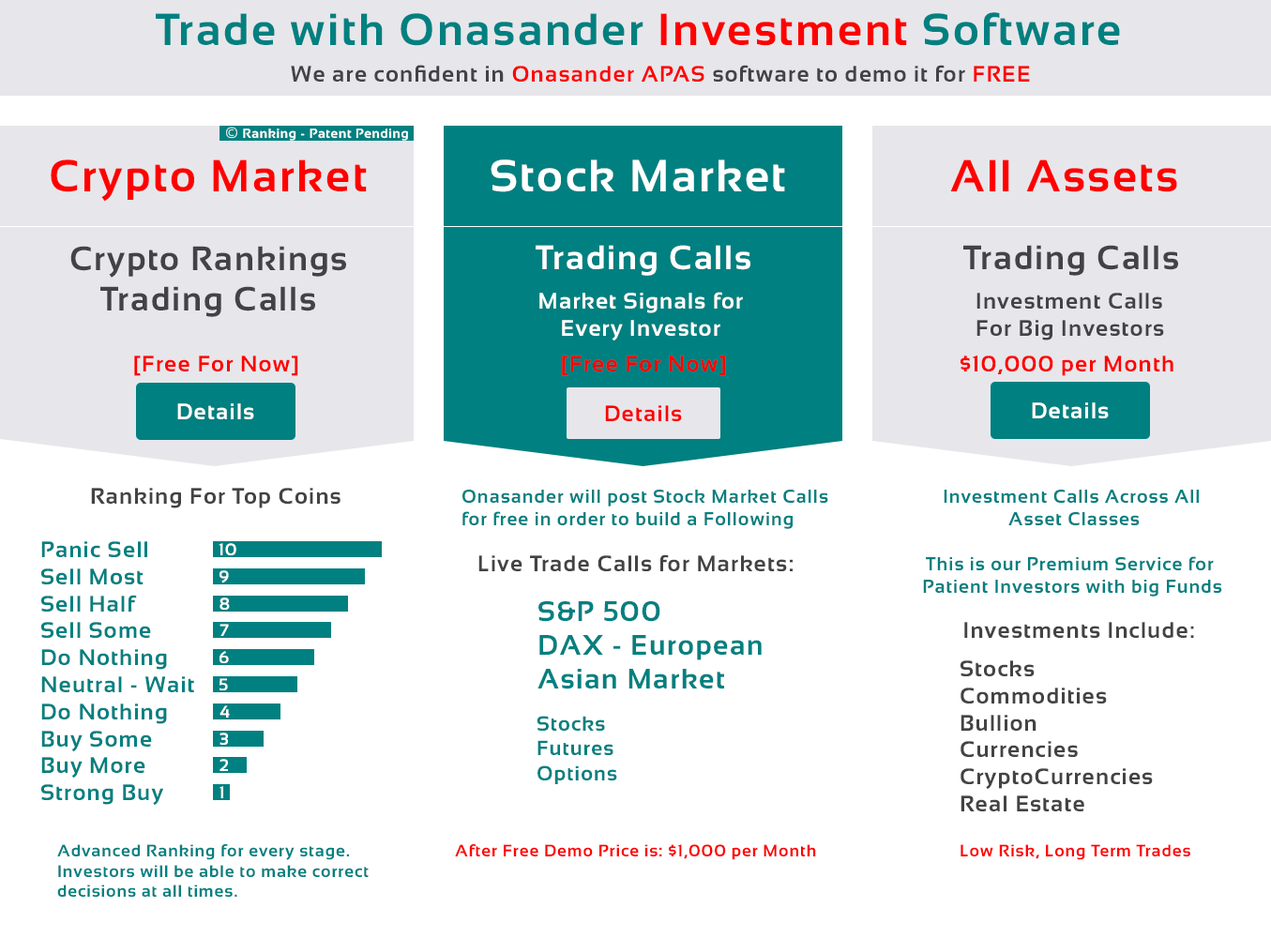
<style>
.page{position:relative;width:1271px;height:938px;background:#ffffff}
.page>*{position:absolute;margin:0}
.t1{font:45px "Sansation-Bold";letter-spacing:0.05em;color:#008080}
.t2{font:45px "Sansation-Bold";letter-spacing:0.05em;color:#ff0000}
.t3{font:22.5px "Sansation-Bold";letter-spacing:0.05em;color:#434244}
.t4{font:22.5px "Sansation-Bold";letter-spacing:0.05em;color:#ff0000}
.t5{font:13.1px "Sansation-Bold";letter-spacing:0.05em;color:#ffffff}
.t6{font:15px "Sansation-Bold";letter-spacing:0.05em;color:#ffffff}
.t7{font:45px "Sansation-Bold";letter-spacing:0.05em;color:#ffffff}
.t8{font:33.8px "Sansation-Bold";letter-spacing:0.05em;color:#434244}
.t9{font:33.8px "Sansation-Bold";letter-spacing:0.05em;color:#ffffff}
.t10{font:22.5px "Sansation-Bold";letter-spacing:0.05em;color:#ffffff}
.t11{font:18.8px "Sansation-Bold";letter-spacing:0.05em;color:#008080}
.t12{font:22.5px "Sansation-Bold";letter-spacing:0.05em;color:#008080}
.t13{font:16.9px "Sansation-Bold";letter-spacing:0.05em;color:#ffffff}
.t14{font:28.1px "Sansation-Bold";letter-spacing:0.05em;color:#008080}
.t15{font:20.6px "Sansation-Bold";letter-spacing:0.05em;color:#008080}
.t16{font:16.9px "Sansation-Bold";letter-spacing:0.05em;color:#008080}
.t17{font:16.9px "Sansation-Bold";letter-spacing:0.05em;color:#ff0000}
</style>
<div class="page">
<p class="t1" style="left:156px;top:12px;width:964px;height:34px">Trade with Onasander <span class="t2">Investment</span> Software</p>
<p class="t3" style="left:291px;top:65px;width:739px;height:17px">We are confident in <span class="t4">Onasander APAS</span> software to demo it for <span class="t4">FREE</span></p>
<p class="t5" style="left:226px;top:127px;width:182px;height:14px"><span class="t6">©</span> Ranking - Patent Pending</p>
<p class="t2" style="left:51px;top:159px;width:316px;height:43px">Crypto Market</p>
<p class="t7" style="left:491px;top:159px;width:294px;height:33px">Stock Market</p>
<p class="t2" style="left:950px;top:159px;width:227px;height:33px">All Assets</p>
<p class="t8" style="left:70px;top:246px;width:276px;height:71px;text-align:center">Crypto Rankings<br>Trading Calls</p>
<p class="t9" style="left:536px;top:245px;width:214px;height:31px">Trading Calls</p>
<p class="t8" style="left:963px;top:245px;width:215px;height:31px">Trading Calls</p>
<p class="t10" style="left:539px;top:292px;width:204px;height:49px;text-align:center">Market Signals for <br>Every Investor</p>
<p class="t3" style="left:977px;top:293px;width:187px;height:48px">Investment Calls<br>For Big Investors</p>
<p class="t4" style="left:134px;top:356px;width:164px;height:20px">[Free For Now]</p>
<p class="t4" style="left:562px;top:356px;width:164px;height:20px">[Free For Now]</p>
<p class="t4" style="left:961px;top:356px;width:213px;height:20px">$10,000 per Month</p>
<p class="t10" style="left:177px;top:403px;width:77px;height:16px">Details</p>
<p class="t4" style="left:605px;top:405px;width:77px;height:16px">Details</p>
<p class="t10" style="left:1032px;top:402px;width:77px;height:16px">Details</p>
<p class="t3" style="left:91px;top:488px;width:250px;height:20px">Ranking For Top Coins</p>
<p class="t11" style="left:462px;top:490px;width:366px;height:39px">Onasander will post Stock Market Calls<br>for free in order to build a Following</p>
<p class="t11" style="left:944px;top:490px;width:255px;height:35px;text-align:center">Investment Calls Across All <br>Asset Classes</p>
<p class="t12" style="left:41px;top:541px;width:153px;height:264px">Panic Sell<br>Sell Most<br>Sell Half<br>Sell Some<br>Do Nothing<br>Neutral - Wait<br>Do Nothing<br>Buy Some<br>Buy More<br>Strong Buy</p>
<p class="t13" style="left:219px;top:543px;width:17px;height:12px">10</p>
<p class="t3" style="left:478px;top:554px;width:315px;height:17px">Live Trade Calls for Markets:</p>
<p class="t11" style="left:923px;top:556px;width:299px;height:41px;text-align:center">This is our Premium Service for <br>Patient Investors with big Funds</p>
<p class="t13" style="left:220px;top:570px;width:9px;height:13px">9</p>
<p class="t13" style="left:220px;top:598px;width:10px;height:12px">8</p>
<p class="t14" style="left:538px;top:601px;width:224px;height:89px">S&amp;P 500<br>DAX - European<br>Asian Market</p>
<p class="t13" style="left:220px;top:624px;width:9px;height:12px">7</p>
<p class="t3" style="left:964px;top:622px;width:230px;height:16px">Investments Include:</p>
<p class="t13" style="left:220px;top:651px;width:9px;height:12px">6</p>
<p class="t3" style="left:961px;top:660px;width:192px;height:151px">Stocks<br>Commodities<br>Bullion<br>Currencies<br>CryptoCurrencies<br>Real Estate</p>
<p class="t13" style="left:220px;top:678px;width:8px;height:12px">5</p>
<p class="t13" style="left:220px;top:705px;width:10px;height:13px">4</p>
<p class="t15" style="left:537px;top:716px;width:80px;height:68px">Stocks<br>Futures<br>Options</p>
<p class="t13" style="left:220px;top:733px;width:8px;height:12px">3</p>
<p class="t13" style="left:220px;top:759px;width:8px;height:12px">2</p>
<p class="t13" style="left:220px;top:786px;width:3px;height:12px">1</p>
<p class="t16" style="left:57px;top:844px;width:312px;height:53px">Advanced Ranking for every stage.<br>Investors will be able to make correct <br>decisions at all times.</p>
<p class="t17" style="left:455px;top:844px;width:361px;height:16px">After Free Demo Price is: $1,000 per Month</p>
<p class="t17" style="left:961px;top:844px;width:229px;height:16px">Low Risk, Long Term Trades</p>
</div>
